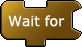
<style>
.page{position:relative;width:82px;height:47px;background:#ffffff}
.page>*{position:absolute;margin:0}
.t1{font:14px "Verdana";color:#ffffff}
</style>
<div class="page">
<p class="t1" style="left:8px;top:15px;width:57px;height:12px">Wait for</p>
</div>
